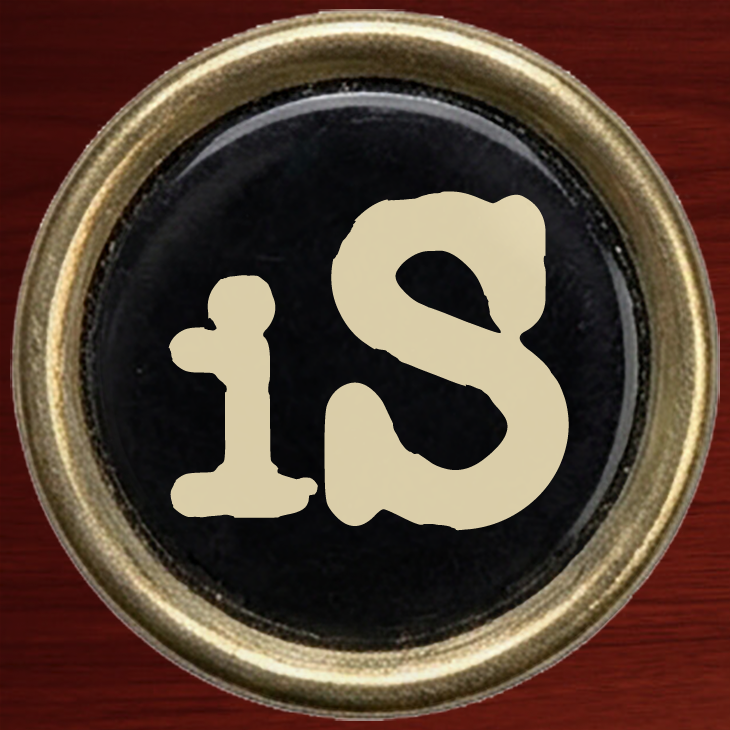
<style>
.page{position:relative;width:730px;height:730px}
.page>*{position:absolute;margin:0}
.t1{font:389.3px "TT2020StyleB-Regular";letter-spacing:-0.14em;color:#dacda9}
.t2{font:517.3px "TT2020StyleB-Regular";color:#dacda9}
</style>
<div class="page">
<p class="t1" style="left:168px;top:191px;width:401px;height:340px">i<span class="t2">S</span></p>
</div>
